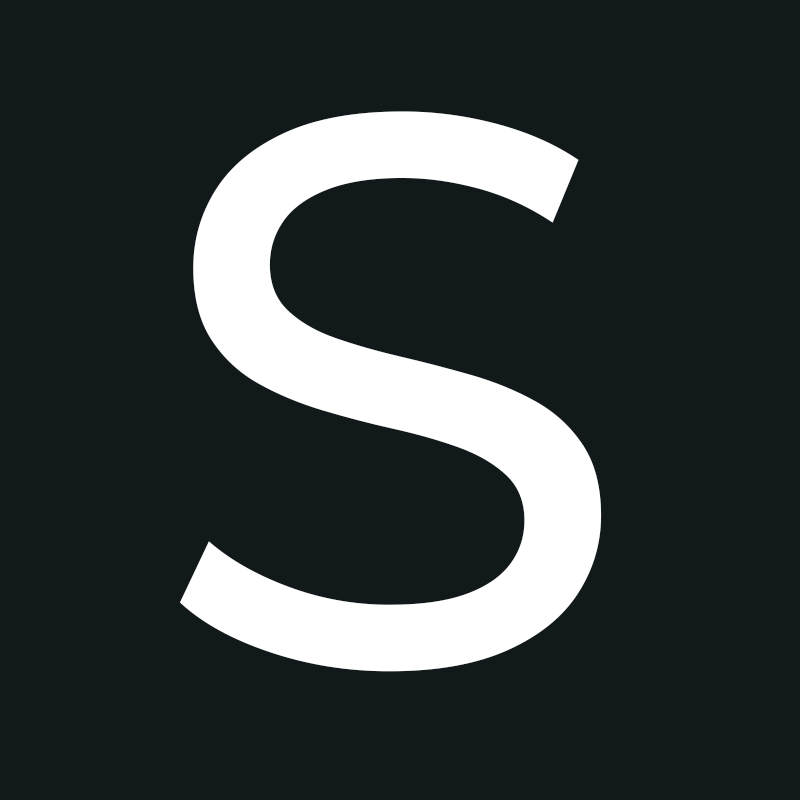
<style>
.page{position:relative;width:800px;height:800px;background:#11191b}
.page>*{position:absolute;margin:0}
.t1{font:781.8px "Montserrat-Medium";color:#ffffff}
</style>
<div class="page">
<p class="t1" style="left:180px;top:111px;width:422px;height:561px">S</p>
</div>
